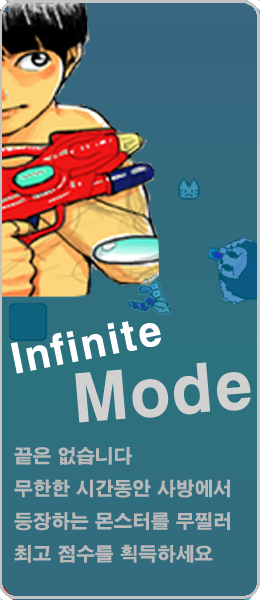
<style>
.page{position:relative;width:260px;height:600px}
.page>*{position:absolute;margin:0}
.t1{font:40px "H2gtrE";color:#ffffff}
.t2{font:64px "H2gtrE";color:#d1d1d1}
.t3{font:18.7px "H2gtrE";color:#b8b8b8}
</style>
<div class="page">
<p class="t1" style="left:10px;top:321px;width:151px;height:53px;rotate:-11deg">Infinite</p>
<p class="t2" style="left:75px;top:362px;width:176px;height:61px;rotate:-5deg">Mode</p>
<p class="t3" style="left:14px;top:447px;width:217px;height:116px">끝은 없습니다<br>무한한 시간동안 사방에서<br>등장하는 몬스터를 무찔러<br>최고 점수를 획득하세요</p>
</div>
